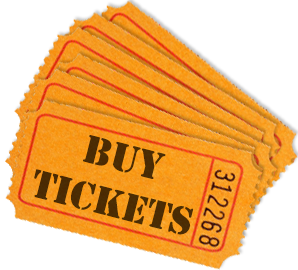
<style>
.page{position:relative;width:298px;height:270px;background:#ffffff}
.page>*{position:absolute;margin:0}
.t1{font:36.7px/46.5px "StencilStd";color:#4b2c03}
</style>
<div class="page">
<p class="t1" style="left:34px;top:135px;width:160px;height:100px;text-align:center;rotate:14deg">Buy<br>Tickets</p>
</div>
